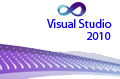
<style>
.page{position:relative;width:120px;height:79px;background:#ffffff}
.page>*{position:absolute;margin:0}
.t1{font:12px "MyriadPro-Regular";color:#0c00ff}
</style>
<div class="page">
<p class="t1" style="left:47px;top:19px;width:65px;height:9px">Visual Studio</p>
<p class="t1" style="left:87px;top:32px;width:24px;height:8px">2010</p>
</div>
